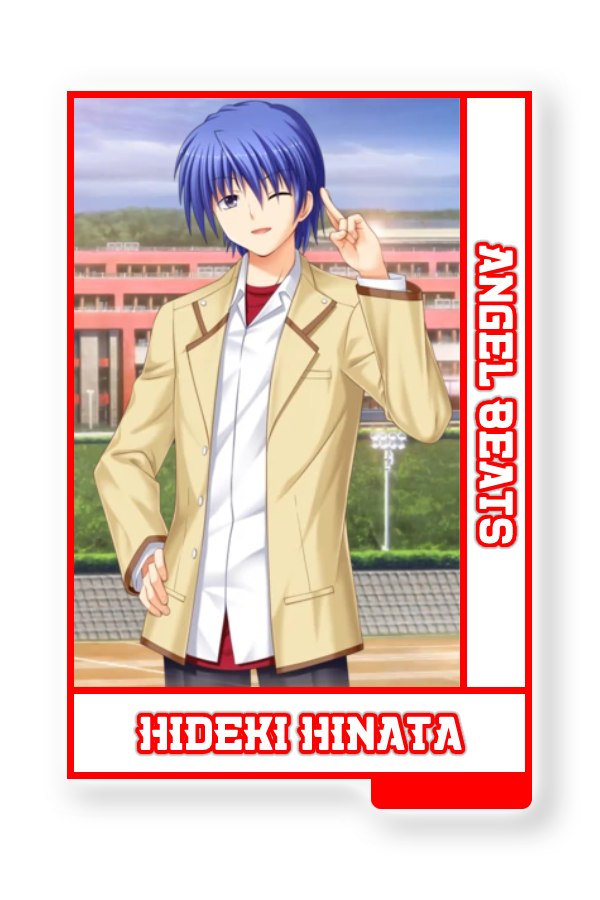
<style>
.page{position:relative;width:600px;height:900px;background:#ffffff}
.page>*{position:absolute;margin:0}
.t1{font:48.8px "KillerCollege";color:#ffffff}
.t2{font:48.6px "KillerCollege";color:#ffffff}
</style>
<div class="page">
<p class="t1" style="left:479px;top:245px;width:34px;height:299px;rotate:90deg">Angel Beats</p>
<p class="t2" style="left:138px;top:716px;width:324px;height:35px">HIDEKI HINATA</p>
</div>
